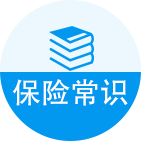
<style>
.page{position:relative;width:141px;height:141px;background:#ecf8fe}
.page>*{position:absolute;margin:0}
.t1{font:28.9px "AdobeHeitiStd-Regular";letter-spacing:0.01em;color:#ffffff}
</style>
<div class="page">
<p class="t1" style="left:12px;top:79px;width:116px;height:27px">保险常识</p>
</div>
